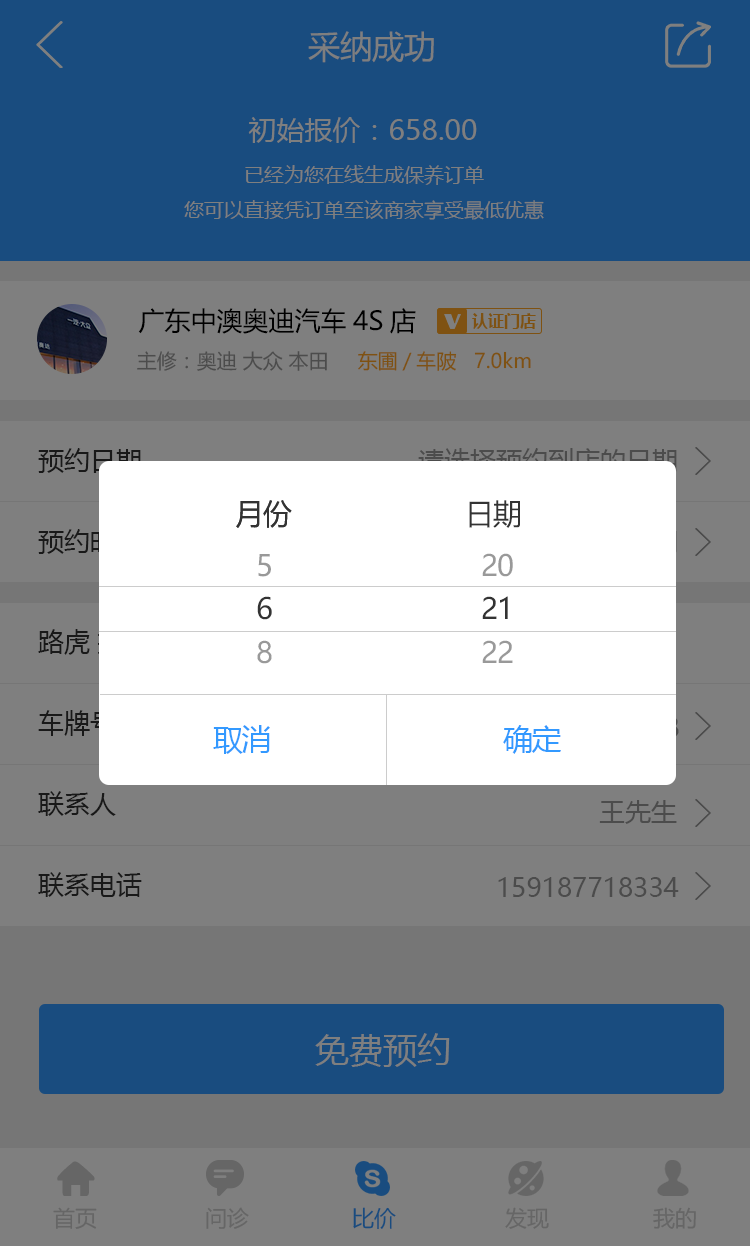
<style>
.page{position:relative;width:750px;height:1246px;background:#7f7f7f}
.page>*{position:absolute;margin:0}
.t1{font:32px "MicrosoftYaHei";color:#7f7f7f}
.t2{font:28px "MicrosoftYaHei";color:#7f7f7f}
.t3{font:20px "MicrosoftYaHei";color:#7f7f7f}
.t4{font:26px "MicrosoftYaHei";color:#000000}
.t5{font:20px "MicrosoftYaHei";color:#4c4c4c}
.t6{font:20px "MicrosoftYaHei";color:#7f5212}
.t7{font:26px "MicrosoftYaHei";color:#191919}
.t8{font:29.1px "MicrosoftYaHei";letter-spacing:-0.04em;color:#333333}
.t9{font:29.1px/43.6px "MicrosoftYaHei";letter-spacing:-0.04em;color:#999999}
.t10{font:29.1px/43.6px "MicrosoftYaHei";letter-spacing:-0.04em;color:#333333}
.t11{font:30px "MicrosoftYaHei";letter-spacing:-0.04em;color:#3399ff}
.t12{font:26px "MicrosoftYaHei";color:#4c4c4c}
.t13{font:34px "MicrosoftYaHei";color:#7f7f7f}
.t14{font:22px "MicrosoftYaHei";color:#666666}
.t15{font:22px "MicrosoftYaHei";color:#194c7f}
</style>
<div class="page">
<p class="t1" style="left:308px;top:31px;width:126px;height:32px">采纳成功</p>
<p class="t2" style="left:248px;top:117px;width:229px;height:26px">初始报价：658.00</p>
<p class="t3" style="left:184px;top:165px;width:360px;height:55px;text-align:center">已经为您在线生成保养订单<br>您可以直接凭订单至该商家享受最低优惠</p>
<p class="t4" style="left:138px;top:308px;width:278px;height:26px">广东中澳奥迪汽车4S店</p>
<p class="t5" style="left:137px;top:351px;width:190px;height:20px">主修：奥迪 大众 本田</p>
<p class="t6" style="left:358px;top:351px;width:173px;height:20px">东圃/车陂   7.0km</p>
<p class="t7" style="left:38px;top:448px;width:103px;height:26px">预约日期</p>
<p class="t8" style="left:236px;top:500px;width:56px;height:28px">月份</p>
<p class="t8" style="left:236px;top:500px;width:56px;height:28px">月份</p>
<p class="t8" style="left:469px;top:500px;width:51px;height:28px">日期</p>
<p class="t9" style="left:257px;top:554px;width:15px;height:110px">5<br><span class="t10">6<br></span>8</p>
<p class="t9" style="left:482px;top:553px;width:31px;height:110px">20<br><span class="t10">21<br></span>22</p>
<p class="t11" style="left:213px;top:725px;width:57px;height:29px">取消</p>
<p class="t11" style="left:503px;top:725px;width:58px;height:29px">确定</p>
<p class="t7" style="left:38px;top:791px;width:78px;height:25px">联系人</p>
<p class="t12" style="left:599px;top:800px;width:78px;height:24px">王先生</p>
<p class="t7" style="left:38px;top:872px;width:104px;height:25px">联系电话</p>
<p class="t12" style="left:498px;top:877px;width:181px;height:20px">159187718334</p>
<p class="t13" style="left:315px;top:1033px;width:135px;height:34px">免费预约</p>
<p class="t14" style="left:53px;top:1207px;width:44px;height:22px">首页</p>
<p class="t14" style="left:206px;top:1207px;width:43px;height:22px">问诊</p>
<p class="t15" style="left:353px;top:1207px;width:43px;height:22px">比价</p>
<p class="t14" style="left:505px;top:1207px;width:44px;height:22px">发现</p>
<p class="t14" style="left:653px;top:1207px;width:43px;height:22px">我的</p>
</div>
